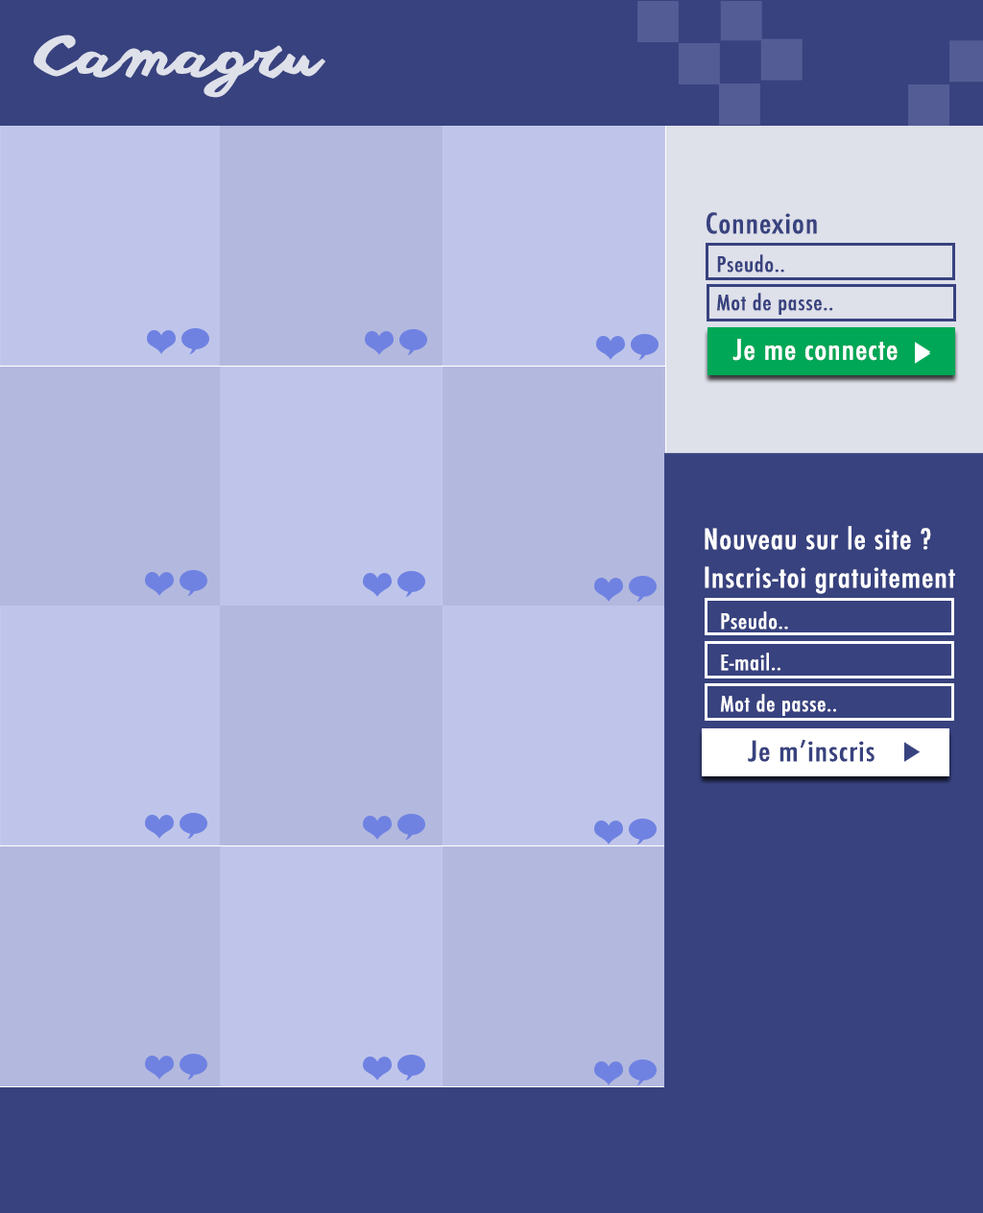
<style>
.page{position:relative;width:983px;height:1213px;background:#38427f}
.page>*{position:absolute;margin:0}
.t1{font:55.3px "anothershabby";color:#dee0ea;scale:1.17 1}
.t2{font:20.7px/38.4px "Futura-CondensedMedium";letter-spacing:0.025em;color:#38427f;scale:1.17 1}
.t3{font:27.6px "Futura-CondensedMedium";letter-spacing:0.025em;color:#38427f;scale:1.17 1}
.t4{font:27.6px "Futura-CondensedMedium";letter-spacing:0.025em;color:#ffffff;scale:1.17 1}
.t5{font:20.7px/41.3px "Futura-CondensedMedium";letter-spacing:0.025em;color:#ffffff;scale:1.17 1}
.t6{font:27.6px/38.4px "Futura-CondensedMedium";letter-spacing:0.025em;color:#ffffff;scale:1.17 1}
.t7{font:27.6px/28.8px "Futura-CondensedMedium";letter-spacing:0.025em;color:#ffffff;scale:1.17 1}
.t8{font:27.6px/34.6px "Futura-CondensedMedium";letter-spacing:0.025em;color:#ffffff;scale:1.17 1}
.t9{font:27.6px/49.9px "Futura-CondensedMedium";letter-spacing:0.025em;color:#38427f;scale:1.17 1}
</style>
<div class="page">
<p class="t1" style="left:34px;top:35px;width:291px;height:63px">Camagru</p>
<p class="t2" style="left:706px;top:212px;width:127px;height:103px"><span class="t3">Connexion<br></span>  Pseudo..<br>  Mot de passe..</p>
<p class="t4" style="left:732px;top:339px;width:165px;height:22px">Je me connecte</p>
<p class="t5" style="left:705px;top:526px;width:250px;height:236px"><span class="t6">Nou</span><span class="t7">veau sur le site ? <br>Inscr</span><span class="t6">i</span><span class="t8">s-toi gratuitemen</span><span class="t6">t <br></span>   Pseudo..<br>   E-mail..<br>   Mot de passe..<br>     <span class="t9"> Je m’inscris</span></p>
</div>
